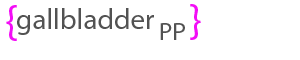
<style>
.page{position:relative;width:300px;height:60px;background:#ffffff}
.page>*{position:absolute;margin:0}
.t1{font:45.8px "MyriadPro-Regular";color:#f30df6}
.t2{font:29.2px "MyriadPro-Regular";color:#525252}
.t3{font:25px "MyriadPro-Regular";color:#525252}
</style>
<div class="page">
<p class="t1" style="left:6px;top:5px;width:11px;height:36px">{</p>
<p class="t1" style="left:190px;top:4px;width:11px;height:36px">}</p>
<p class="t2" style="left:17px;top:8px;width:137px;height:27px">gallbladder</p>
<p class="t3" style="left:160px;top:23px;width:25px;height:17px">PP</p>
</div>
